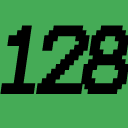
<style>
.page{position:relative;width:128px;height:128px;background:#45ab56}
.page>*{position:absolute;margin:0}
.t1{font:76.8px "Terminal";letter-spacing:-0.06em;color:#000000;font-weight:bold;font-style:italic;scale:0.82 1}
</style>
<div class="page">
<p class="t1" style="left:0px;top:25px;width:130px;height:69px">128</p>
</div>
